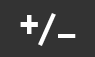
<style>
.page{position:relative;width:95px;height:57px;background:#333333}
.page>*{position:absolute;margin:0}
.t1{font:39.2px "PTSans-Bold";color:#fefefe}
</style>
<div class="page">
<p class="t1" style="left:20px;top:15px;width:18px;height:19px">+</p>
<p class="t1" style="left:38px;top:13px;width:18px;height:33px">/</p>
<p class="t1" style="left:58px;top:34px;width:18px;height:4px">_</p>
</div>
